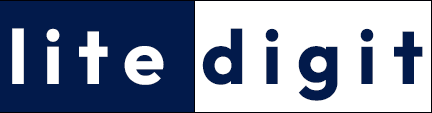
<style>
.page{position:relative;width:432px;height:113px;background:#ffffff}
.page>*{position:absolute;margin:0}
.t1{font:76.5px "Outfit-Bold";letter-spacing:0.2em;color:#ffffff}
.t2{font:76.5px "Outfit-Bold";letter-spacing:0.2em;color:#021a4b}
</style>
<div class="page">
<p class="t1" style="left:12px;top:28px;width:152px;height:57px">lite</p>
<p class="t2" style="left:202px;top:28px;width:221px;height:73px">digit</p>
</div>
